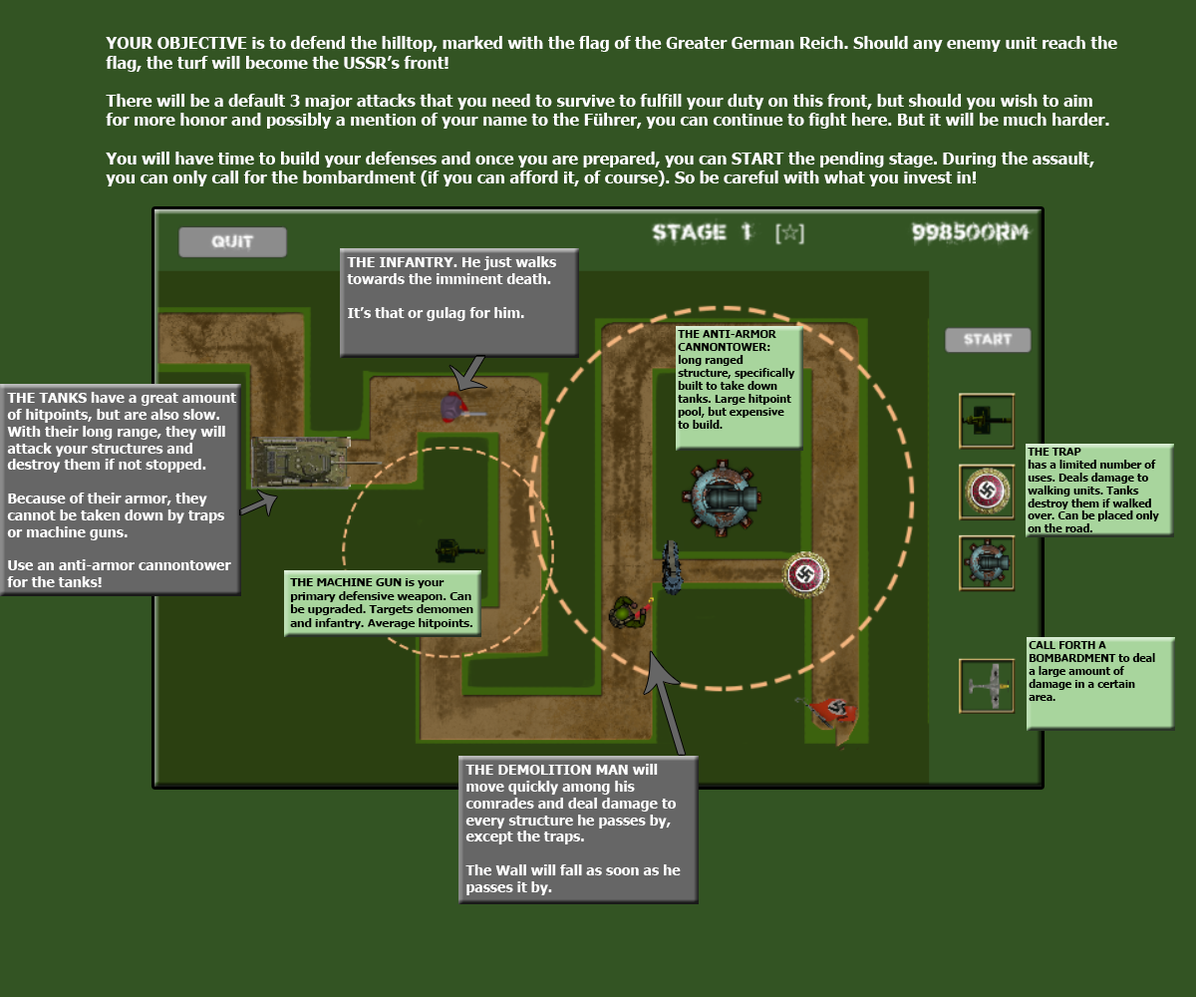
<style>
.page{position:relative;width:1196px;height:997px;background:#335423}
.page>*{position:absolute;margin:0}
.t1{font:15.9px "Tahoma-Bold";color:#ffffff}
.t2{font:14px "Tahoma-Bold";color:#ffffff}
.t3{font:10.8px "Tahoma-Bold";color:#000000}
.t4{font:10.7px "Tahoma-Bold";color:#000000}
.t5{font:11.4px "Tahoma-Bold";color:#000000}
</style>
<div class="page">
<p class="t1" style="left:106px;top:36px;width:1011px;height:150px">YOUR OBJECTIVE is to defend the hilltop, marked with the flag of the Greater German Reich. Should any enemy unit reach the flag, the turf will become the USSR’s front! <br><br>There will be a default 3 major attacks that you need to survive to fulfill your duty on this front, but should you wish to aim for more honor and possibly a mention of your name to the Führer, you can continue to fight here. But it will be much harder.<br><br>You will have time to build your defenses and once you are prepared, you can START the pending stage. During the assault, you can only call for the bombardment (if you can afford it, of course). So be careful with what you invest in!</p>
<p class="t2" style="left:347px;top:256px;width:209px;height:65px">THE INFANTRY. He just walks towards the imminent death. <br><br>It’s that or gulag for him.</p>
<p class="t3" style="left:678px;top:330px;width:117px;height:99px">THE ANTI-ARMOR CANNONTOWER: long ranged structure, specifically built to take down tanks. Large hitpoint pool, but expensive to build.</p>
<p class="t2" style="left:7px;top:392px;width:229px;height:195px">THE TANKS have a great amount of hitpoints, but are also slow. With their long range, they will attack your structures and destroy them if not stopped. <br><br>Because of their armor, they cannot be taken down by traps or machine guns. <br><br>Use an anti-armor cannontower for the tanks!</p>
<p class="t4" style="left:1028px;top:448px;width:131px;height:84px">THE TRAP<br>has a limited number of uses. Deals damage to walking units. Tanks destroy them if walked over. Can be placed only on the road.</p>
<p class="t5" style="left:290px;top:578px;width:183px;height:51px">THE MACHINE GUN is your primary defensive weapon. Can be upgraded. Targets demomen and infantry. Average hitpoints.</p>
<p class="t4" style="left:1029px;top:641px;width:126px;height:60px">CALL FORTH A BOMBARDMENT to deal a large amount of damage in a certain area.</p>
<p class="t2" style="left:466px;top:764px;width:215px;height:131px">THE DEMOLITION MAN will move quickly among his comrades and deal damage to every structure he passes by, except the traps. <br><br>The Wall will fall as soon as he passes it by.</p>
</div>
